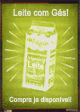
<style>
.page{position:relative;width:80px;height:112px}
.page>*{position:absolute;margin:0}
.t1{font:9.1px "ArialMT";color:#e2e6cf;font-weight:bold;scale:0.86 1}
.t2{font:8.5px "ArialMT";color:#eef2d5;font-weight:bold;scale:0.85 1}
.t3{font:6.8px "ArialMT";color:#e2e5cf;font-weight:bold;scale:0.9 1}
</style>
<div class="page">
<p class="t1" style="left:13px;top:8px;width:56px;height:8px">Leite com Gás!</p>
<p class="t2" style="left:28px;top:60px;width:16px;height:10px;rotate:11deg">Leite</p>
<p class="t3" style="left:9px;top:96px;width:63px;height:8px">Compra ja disponível!</p>
</div>
